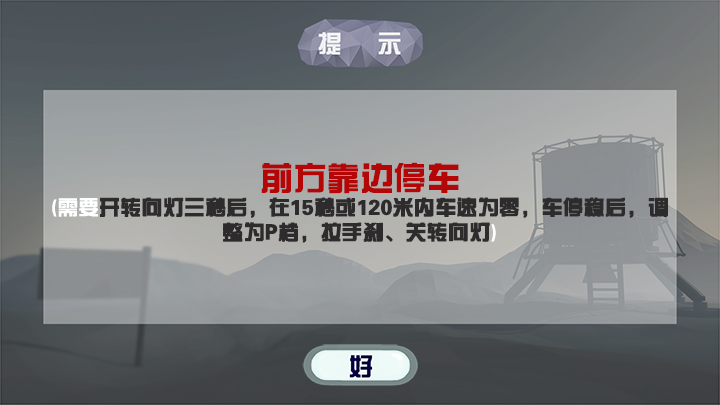
<style>
.page{position:relative;width:720px;height:405px}
.page>*{position:absolute;margin:0}
.t1{font:20.7px "FZZYJW--GB1-0";color:#2d2b2b;font-weight:bold}
.t2{font:33.3px "FZZYJW--GB1-0";color:#b40606}
.t3{font:20.7px "FZZYJW--GB1-0";color:#ffffff}
</style>
<div class="page">
<p class="t1" style="left:52px;top:162px;width:616px;height:81px;text-align:center"><span class="t2">前方靠边停车<br></span><span class="t3">(需要</span>开转向灯三秒后，在15秒或120米内车速为零，车停稳后，调整为P档，拉手刹、关转向灯<span class="t3">)</span></p>
</div>
